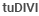
<style>
.page{position:relative;width:39px;height:16px;background:#ffffff}
.page>*{position:absolute;margin:0}
.t1{font:13px "Roboto-Medium";color:#4a4a4a}
</style>
<div class="page">
<p class="t1" style="left:2px;top:3px;width:36px;height:9px">tuDIVI</p>
</div>
